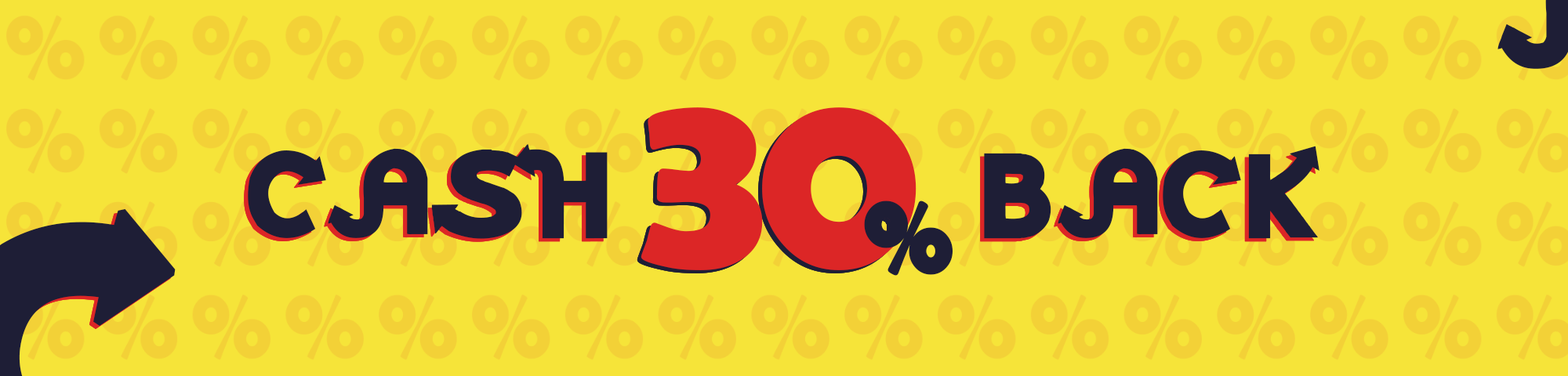
<style>
.page{position:relative;width:1568px;height:376px;background:#f6e439}
.page>*{position:absolute;margin:0}
.t1{font:261.4px "BerlinSansFBDemi-Bold";letter-spacing:-0.06em;color:#dc2626;text-transform:uppercase;font-weight:bold}
.t2{font:150.3px "SubwayRegular";color:#1e1e36;text-transform:uppercase;font-weight:bold}
.t3{font:108.7px "BerlinSansFBDemi-Bold";color:#1e1e36;text-transform:uppercase;font-weight:bold}
</style>
<div class="page">
<p class="t1" style="left:641px;top:107px;width:275px;height:163px">30</p>
<p class="t2" style="left:248px;top:143px;width:1071px;height:96px">Cash        back</p>
<p class="t3" style="left:864px;top:201px;width:89px;height:75px">%</p>
</div>
